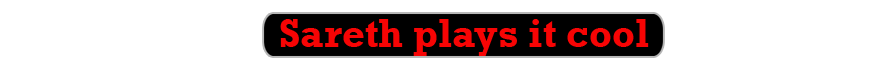
<style>
.page{position:relative;width:882px;height:74px;background:#ffffff}
.page>*{position:absolute;margin:0}
.t1{font:40px "Rockwell-Bold";color:#f70404}
</style>
<div class="page">
<p class="t1" style="left:280px;top:19px;width:369px;height:37px">Sareth plays it cool</p>
</div>
